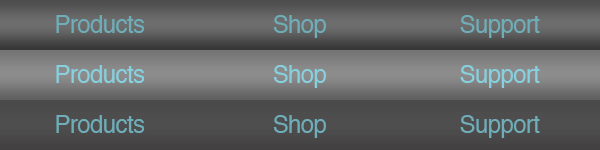
<style>
.page{position:relative;width:600px;height:150px}
.page>*{position:absolute;margin:0}
.t1{font:24px "Helvetica";letter-spacing:-0.025em;color:#6fadb8}
.t2{font:24px "Helvetica";letter-spacing:-0.025em;color:#87d1de}
</style>
<div class="page">
<p class="t1" style="left:56px;top:15px;width:89px;height:18px">Products</p>
<p class="t1" style="left:273px;top:15px;width:53px;height:23px">Shop</p>
<p class="t1" style="left:460px;top:15px;width:80px;height:23px">Support</p>
<p class="t2" style="left:56px;top:65px;width:89px;height:18px">Products</p>
<p class="t2" style="left:273px;top:65px;width:53px;height:23px">Shop</p>
<p class="t2" style="left:460px;top:65px;width:80px;height:23px">Support</p>
<p class="t1" style="left:56px;top:115px;width:89px;height:18px">Products</p>
<p class="t1" style="left:273px;top:115px;width:53px;height:23px">Shop</p>
<p class="t1" style="left:460px;top:115px;width:80px;height:23px">Support</p>
</div>
